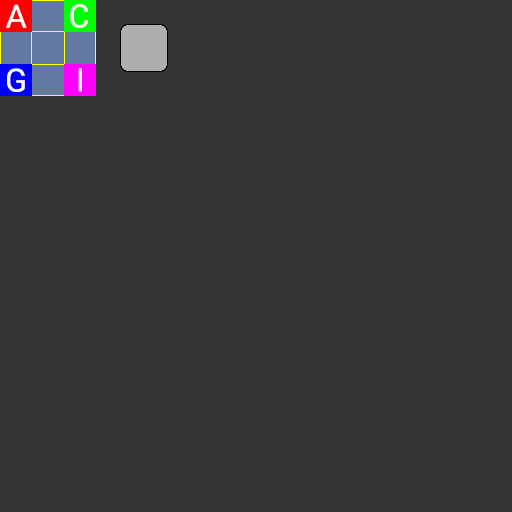
<style>
.page{position:relative;width:512px;height:512px;background:#333333}
.page>*{position:absolute;margin:0}
.t1{font:32px "Roboto-Regular";color:#ffffff}
</style>
<div class="page">
<p class="t1" style="left:6px;top:4px;width:21px;height:24px">A</p>
<p class="t1" style="left:70px;top:4px;width:19px;height:24px">C</p>
<p class="t1" style="left:7px;top:68px;width:18px;height:24px">G</p>
<p class="t1" style="left:78px;top:68px;width:4px;height:24px">I</p>
</div>
